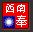
<style>
.page{position:relative;width:33px;height:32px;background:#f20000}
.page>*{position:absolute;margin:0}
.t1{font:10.4px "SimSun";color:#ffffff}
.t2{font:11.7px "SimSun";color:#ffffff}
</style>
<div class="page">
<p class="t1" style="left:6px;top:4px;width:19px;height:9px">西南</p>
<p class="t2" style="left:16px;top:15px;width:11px;height:12px">奉</p>
</div>
